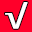
<style>
.page{position:relative;width:32px;height:32px;background:#ff002a}
.page>*{position:absolute;margin:0}
.t1{font:30px "07LogoTypeGothic7";color:#ffffff;font-weight:bold}
</style>
<div class="page">
<p class="t1" style="left:5px;top:2px;width:23px;height:27px">√</p>
</div>
